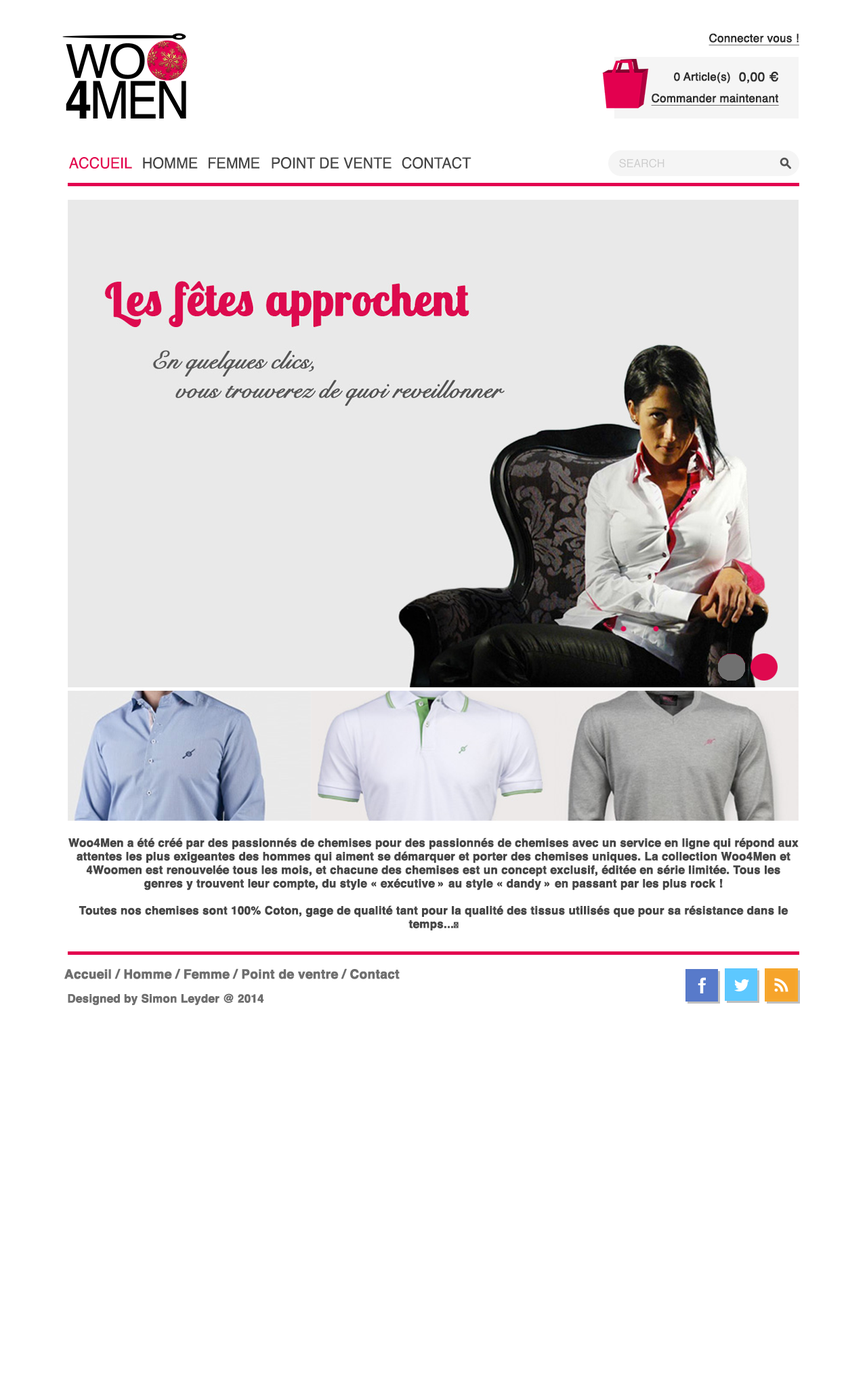
<style>
.page{position:relative;width:867px;height:1376px;background:#ffffff}
.page>*{position:absolute;margin:0}
.t1{font:11.3px "Helvetica";color:#2d2d2d;font-weight:bold;text-decoration:underline}
.t2{font:11.3px "Helvetica";color:#2d2d2d;font-weight:bold}
.t3{font:12.6px "Helvetica";color:#2d2d2d;font-weight:bold}
.t4{font:15.1px "Helvetica";color:#e3004f;text-transform:uppercase;scale:0.96 1}
.t5{font:15.1px "Helvetica";color:#444444;text-transform:uppercase;scale:0.96 1}
.t6{font:11.3px "Helvetica";color:#cccccc;text-transform:uppercase}
.t7{font:11.3px "Helvetica-Bold";color:#474747;font-weight:bold}
.t8{font:11.3px "AdobeArabic-Regular";color:#474747;font-weight:bold}
.t9{font:12.6px "Helvetica-Bold";color:#6f6f6f;font-weight:bold}
.t10{font:11.3px "Helvetica-Bold";color:#6f6f6f;font-weight:bold}
</style>
<div class="page">
<p class="t1" style="left:708px;top:33px;width:91px;height:12px">Connecter vous !</p>
<p class="t2" style="left:674px;top:72px;width:56px;height:11px">0 Article(s)</p>
<p class="t3" style="left:739px;top:71px;width:39px;height:12px">0,00 €</p>
<p class="t1" style="left:651px;top:93px;width:128px;height:13px">Commander maintenant</p>
<p class="t4" style="left:69px;top:157px;width:63px;height:12px">Accueil</p>
<p class="t5" style="left:143px;top:157px;width:55px;height:12px">Homme</p>
<p class="t5" style="left:209px;top:157px;width:50px;height:12px">Femme</p>
<p class="t5" style="left:272px;top:157px;width:119px;height:12px">Point de vente</p>
<p class="t5" style="left:402px;top:157px;width:69px;height:12px">Contact</p>
<p class="t6" style="left:619px;top:158px;width:45px;height:10px">search</p>
<p class="t7" style="left:68px;top:838px;width:730px;height:92px;text-align:center">Woo4Men a été créé par des passionnés de chemises pour des passionnés de chemises avec un service en ligne qui répond aux attentes les plus exigeantes des hommes qui aiment se démarquer et porter des chemises uniques. La collection Woo4Men et 4Woomen est renouvelée tous les mois, et chacune des chemises est un concept exclusif, éditée en série limitée. Tous les genres y trouvent leur compte, du style « exécutive » au style « dandy » en passant par les plus rock !<br><br>Toutes nos chemises sont 100% Coton, gage de qualité tant pour la qualité des tissus utilisés que pour sa résistance dans le temps...<span class="t8"></span></p>
<p class="t9" style="left:64px;top:968px;width:335px;height:11px">Accueil / Homme / Femme / Point de ventre / Contact</p>
<p class="t10" style="left:68px;top:993px;width:196px;height:12px">Designed by Simon Leyder @ 2014</p>
</div>
